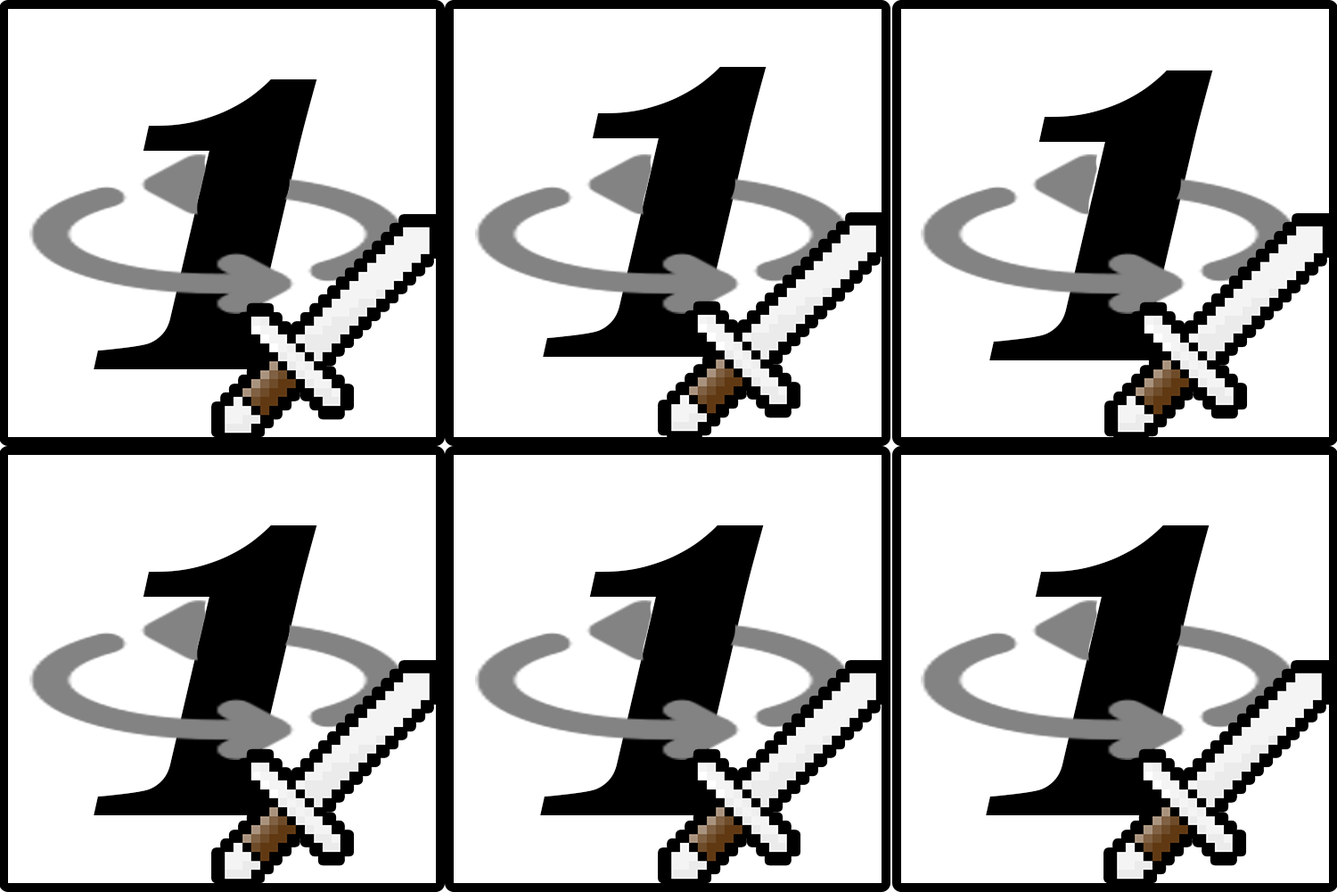
<style>
.page{position:relative;width:1337px;height:892px;background:#ffffff}
.page>*{position:absolute;margin:0}
.t1{font:535px "Georgia-BoldItalic";color:#000000}
</style>
<div class="page">
<p class="t1" style="left:543px;top:67px;width:224px;height:290px">1</p>
<p class="t1" style="left:990px;top:70px;width:223px;height:290px">1</p>
<p class="t1" style="left:94px;top:79px;width:223px;height:290px">1</p>
<p class="t1" style="left:94px;top:525px;width:223px;height:290px">1</p>
<p class="t1" style="left:540px;top:525px;width:224px;height:290px">1</p>
<p class="t1" style="left:986px;top:525px;width:224px;height:290px">1</p>
</div>
